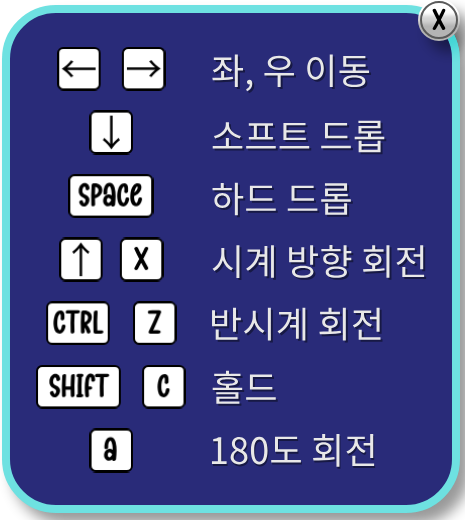
<style>
.page{position:relative;width:465px;height:520px;background:#292b79}
.page>*{position:absolute;margin:0}
.t1{font:44px "GoodGhostRegular";color:#000000}
.t2{font:36.3px "NotoSansKR-Regular";color:#e8e8e8}
.t3{font:36.3px "NotoSansKR-Regular";color:#171944}
</style>
<div class="page">
<p class="t1" style="left:431px;top:7px;width:16px;height:25px">X</p>
<p class="t2" style="left:212px;top:54px;width:158px;height:38px">좌, 우 이동</p>
<p class="t2" style="left:212px;top:120px;width:173px;height:33px">소프트 드롭</p>
<p class="t2" style="left:212px;top:182px;width:139px;height:34px">하드 드롭</p>
<p class="t2" style="left:212px;top:244px;width:213px;height:34px">시계 방향 회전</p>
<p class="t2" style="left:212px;top:307px;width:169px;height:34px">반시계 회전</p>
<p class="t2" style="left:212px;top:370px;width:64px;height:34px">홀드</p>
<p class="t3" style="left:214px;top:372px;width:64px;height:34px">홀드</p>
<p class="t2" style="left:211px;top:434px;width:164px;height:33px">180도 회전</p>
</div>
